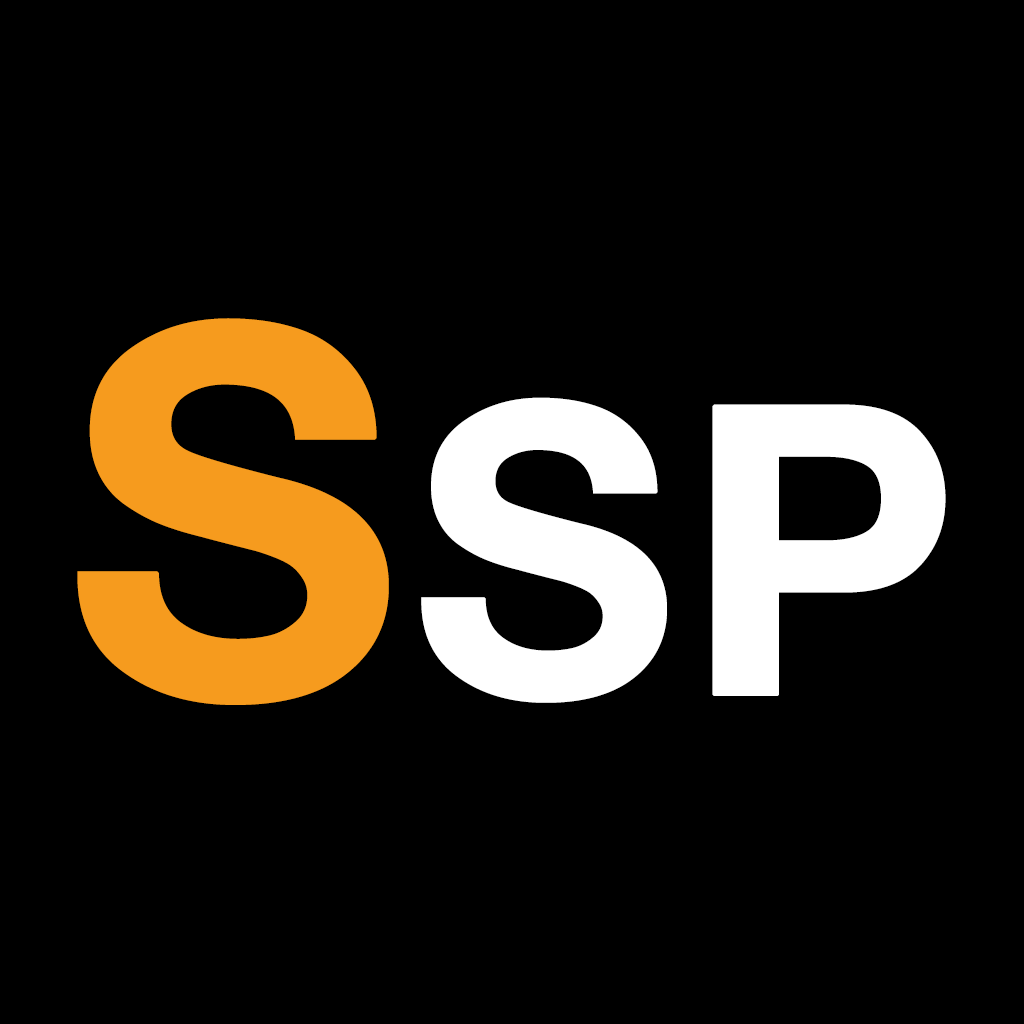
<style>
.page{position:relative;width:1024px;height:1024px;background:#000000}
.page>*{position:absolute;margin:0}
.t1{font:404px "HelveticaNeueLTW1G-Bd";color:#ffffff;font-weight:bold}
.t2{font:512px "HelveticaNeueLTW1G-Bd";color:#f69b1e;font-weight:bold}
</style>
<div class="page">
<p class="t1" style="left:77px;top:318px;width:869px;height:387px"><span class="t2">S</span>SP</p>
</div>
